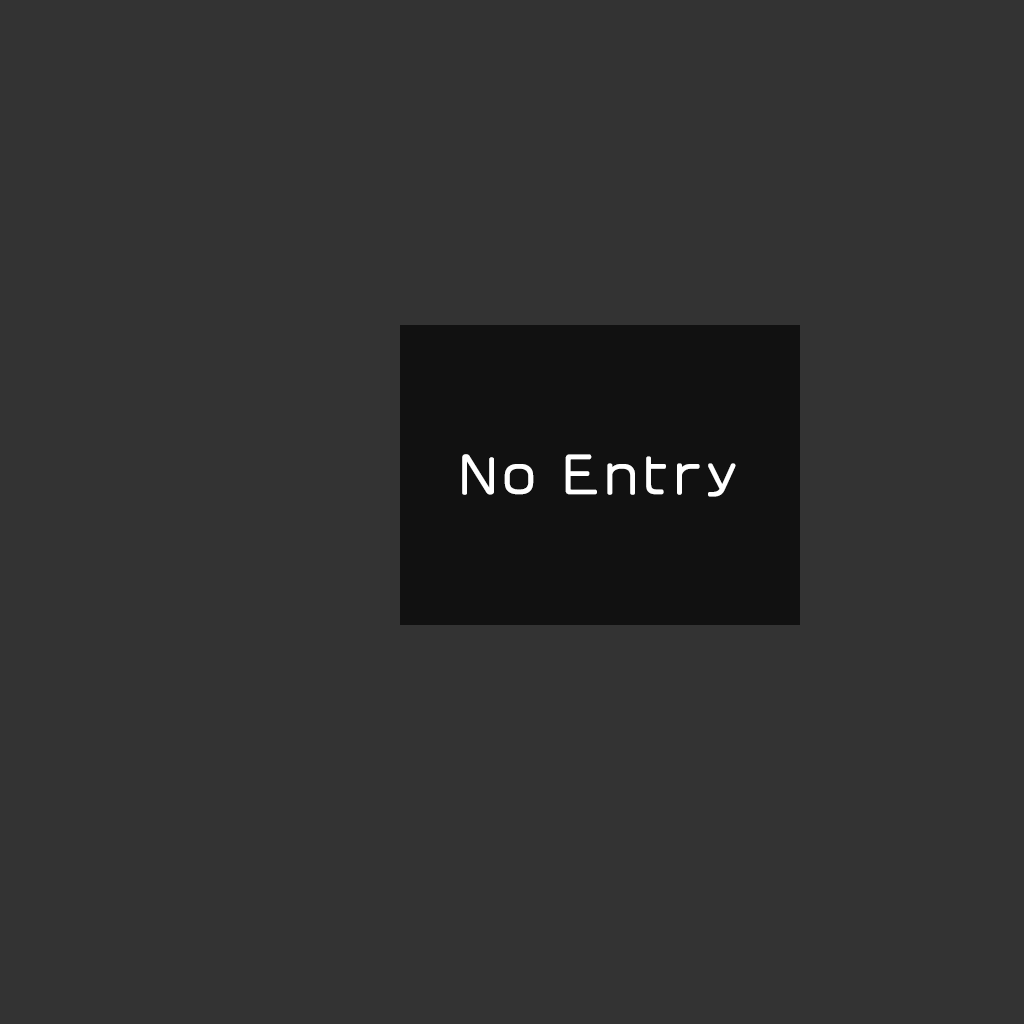
<style>
.page{position:relative;width:1024px;height:1024px;background:#333333}
.page>*{position:absolute;margin:0}
.t1{font:48px "VDL-MegaMaru-Regular";letter-spacing:0.1em;color:#ffffff;font-weight:bold}
</style>
<div class="page">
<p class="t1" style="left:462px;top:454px;width:274px;height:43px">No Entry</p>
</div>
